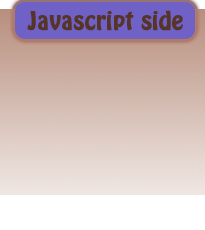
<style>
.page{position:relative;width:205px;height:230px}
.page>*{position:absolute;margin:0}
.t1{font:22px "HoboStd";color:#563527;font-weight:bold}
</style>
<div class="page">
<p class="t1" style="left:27px;top:10px;width:156px;height:21px">Javascript side</p>
</div>
